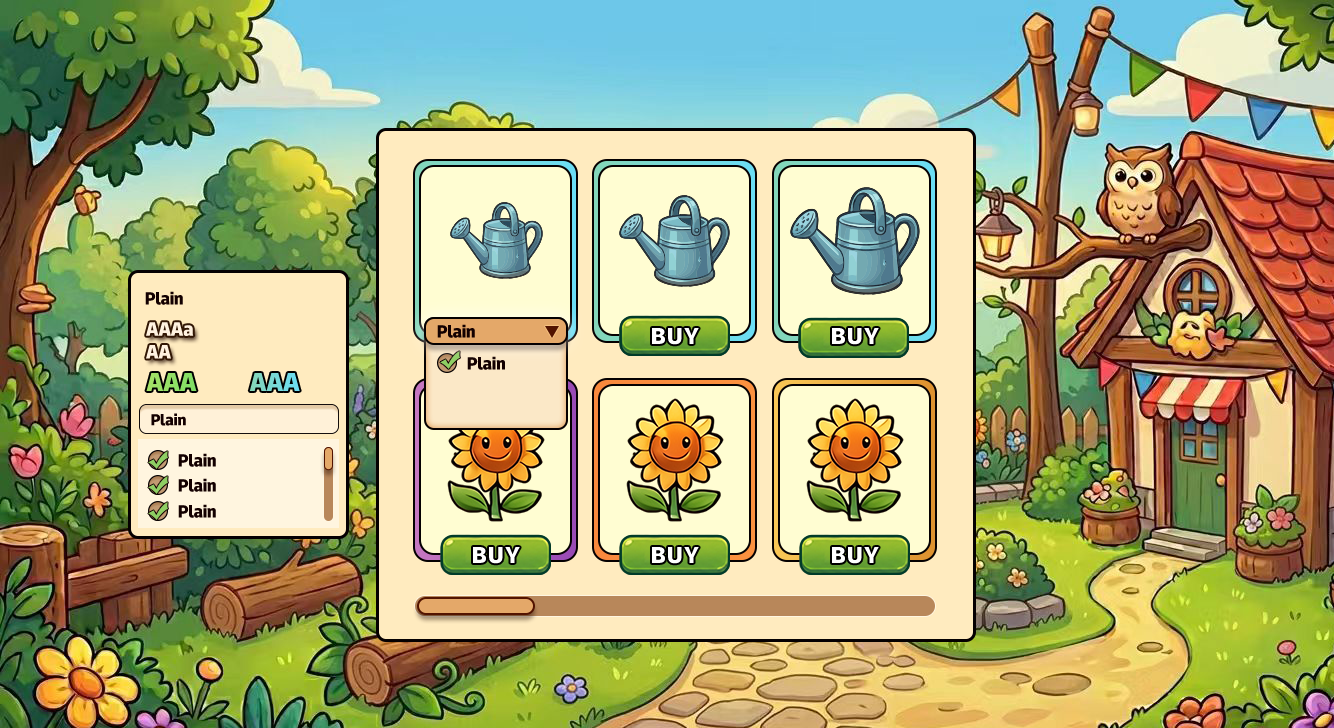
<style>
.page{position:relative;width:1334px;height:728px}
.page>*{position:absolute;margin:0}
.t1{font:15.2px "HYYaKuHeiW";color:#130000}
.t2{font:17.1px/22.8px "HYYaKuHeiW";color:#fff2e0}
.t3{font:20px "HYYaKuHeiW";letter-spacing:0.1em;color:#ffffff}
.t4{font:22.8px "HYYaKuHeiW";color:#93df66}
.t5{font:22.8px "HYYaKuHeiW"}
.t6{font:14px "HYYaKuHeiW";color:#130000}
</style>
<div class="page">
<p class="t1" style="left:145px;top:291px;width:38px;height:14px">Plain</p>
<p class="t2" style="left:146px;top:322px;width:48px;height:37px">AAAa<br>AA</p>
<p class="t1" style="left:437px;top:324px;width:38px;height:14px">Plain</p>
<p class="t3" style="left:652px;top:328px;width:47px;height:17px">BUY</p>
<p class="t3" style="left:832px;top:328px;width:47px;height:17px">BUY</p>
<p class="t1" style="left:467px;top:356px;width:38px;height:14px">Plain</p>
<p class="t4" style="left:146px;top:373px;width:51px;height:18px">AAA</p>
<p class="t5" style="left:249px;top:373px;width:51px;height:18px">AAA</p>
<p class="t6" style="left:151px;top:413px;width:35px;height:13px">Plain</p>
<p class="t1" style="left:178px;top:453px;width:38px;height:14px">Plain</p>
<p class="t1" style="left:178px;top:478px;width:38px;height:14px">Plain</p>
<p class="t1" style="left:178px;top:504px;width:38px;height:14px">Plain</p>
<p class="t3" style="left:473px;top:547px;width:47px;height:17px">BUY</p>
<p class="t3" style="left:652px;top:547px;width:47px;height:17px">BUY</p>
<p class="t3" style="left:832px;top:547px;width:47px;height:17px">BUY</p>
</div>
